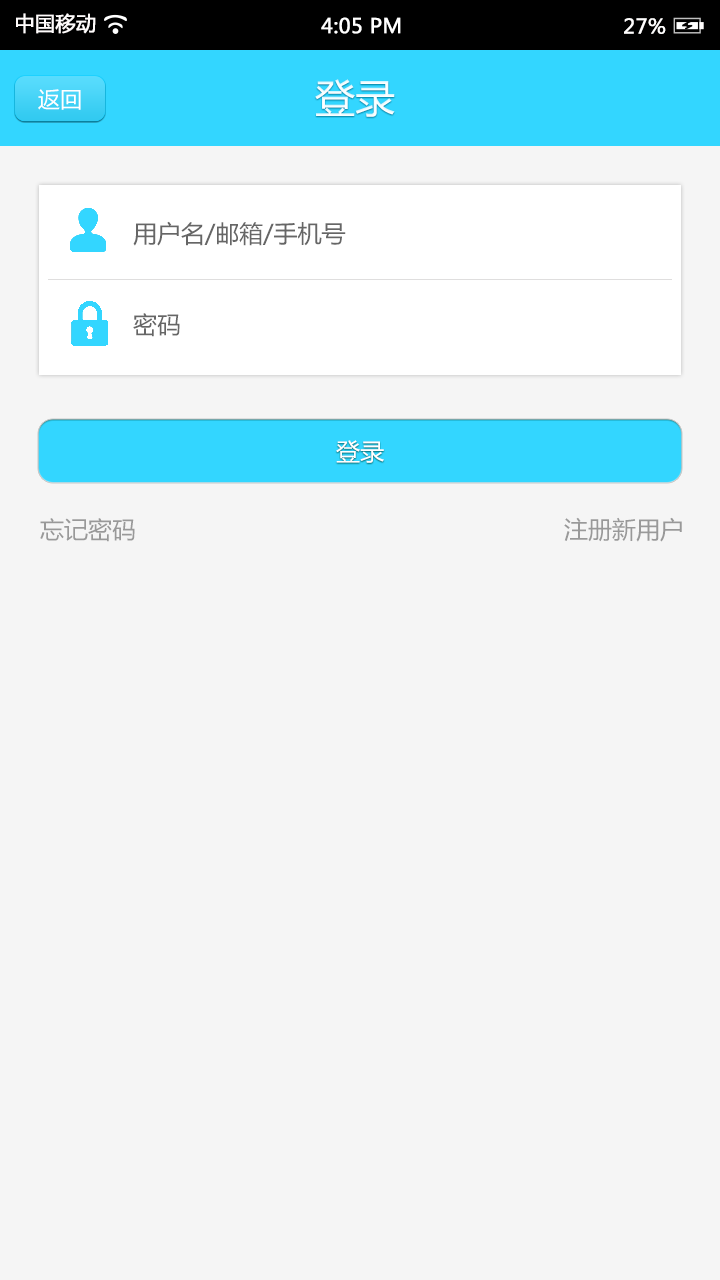
<style>
.page{position:relative;width:720px;height:1280px;background:#f5f5f5}
.page>*{position:absolute;margin:0}
.t1{font:20px "MicrosoftYaHei";color:#fffcfc;font-weight:bold}
.t2{font:20px "MicrosoftYaHei";color:#ffffff;font-weight:bold}
.t3{font:20px "MicrosoftYaHei";color:#fffefe;font-weight:bold}
.t4{font:22px "MicrosoftYaHei";color:#ffffff}
.t5{font:40px "MicrosoftYaHei";color:#ffffff}
.t6{font:24px "MicrosoftYaHei";color:#666666}
.t7{font:24px "MicrosoftYaHei";color:#ffffff}
.t8{font:24px "MicrosoftYaHei";color:#999999}
</style>
<div class="page">
<p class="t1" style="left:16px;top:13px;width:80px;height:21px">中国移动</p>
<p class="t2" style="left:321px;top:17px;width:80px;height:17px">4:05 PM</p>
<p class="t3" style="left:624px;top:18px;width:42px;height:16px">27%</p>
<p class="t4" style="left:38px;top:89px;width:43px;height:21px">返回</p>
<p class="t5" style="left:315px;top:79px;width:80px;height:38px">登录</p>
<p class="t6" style="left:133px;top:221px;width:213px;height:25px">用户名/邮箱/手机号</p>
<p class="t6" style="left:133px;top:313px;width:47px;height:24px">密码</p>
<p class="t7" style="left:336px;top:440px;width:48px;height:23px">登录</p>
<p class="t8" style="left:40px;top:518px;width:95px;height:24px">忘记密码</p>
<p class="t8" style="left:564px;top:517px;width:118px;height:25px">注册新用户</p>
</div>
